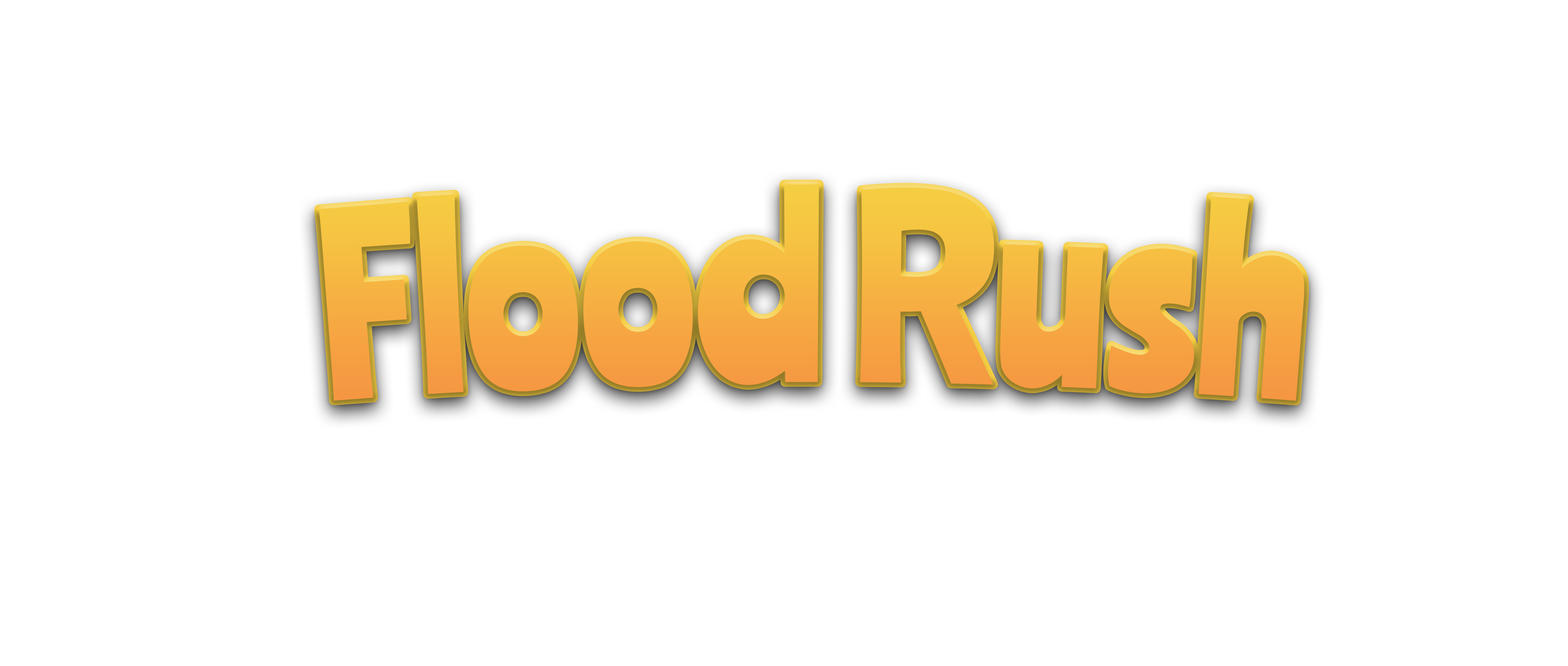
<style>
.page{position:relative;width:1568px;height:666px;background:#ffffff}
.page>*{position:absolute;margin:0}
.t1{font:235.2px "Ranchers-Regular";color:#f6af42}
</style>
<div class="page">
<p class="t1" style="left:319px;top:184px;width:986px;height:217px">Flood Rush</p>
</div>
